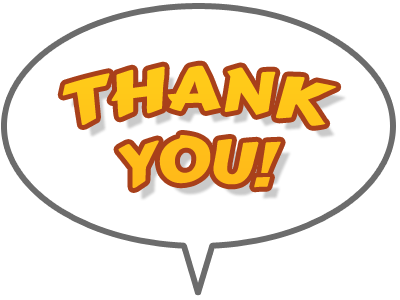
<style>
.page{position:relative;width:400px;height:300px;background:#ffffff}
.page>*{position:absolute;margin:0}
.t1{font:60px "CarterOne";color:#ffc719}
</style>
<div class="page">
<p class="t1" style="left:62px;top:65px;width:275px;height:123px;text-align:center">THANK<br>YOU!</p>
</div>
